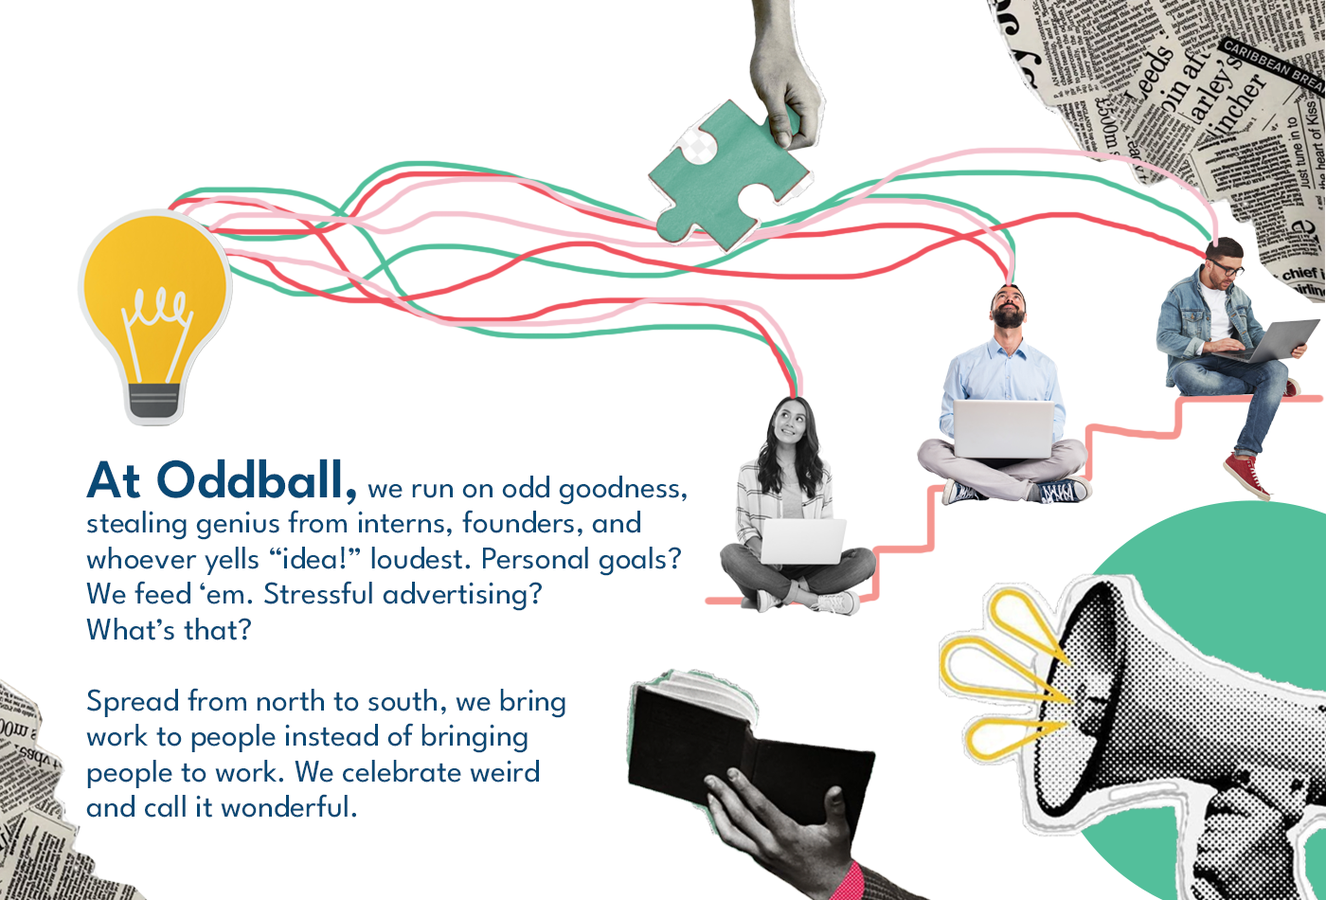
<style>
.page{position:relative;width:1326px;height:900px;background:#ffffff}
.page>*{position:absolute;margin:0}
.t1{font:31.6px/35.5px "LeagueSpartan-Regular";color:#094975}
.t2{font:55.2px/35.5px "LeagueSpartan-SemiBold";color:#094975}
</style>
<div class="page">
<p class="t1" style="left:86px;top:458px;width:600px;height:359px"><span class="t2">At Oddball,</span> we run on odd goodness,<br>stealing genius from interns, founders, and<br>whoever yells “idea!” loudest. Personal goals?<br>We feed ‘em. Stressful advertising?<br>What’s that?<br><br>Spread from north to south, we bring<br>work to people instead of bringing<br>people to work. We celebrate weird<br>and call it wonderful.</p>
</div>
